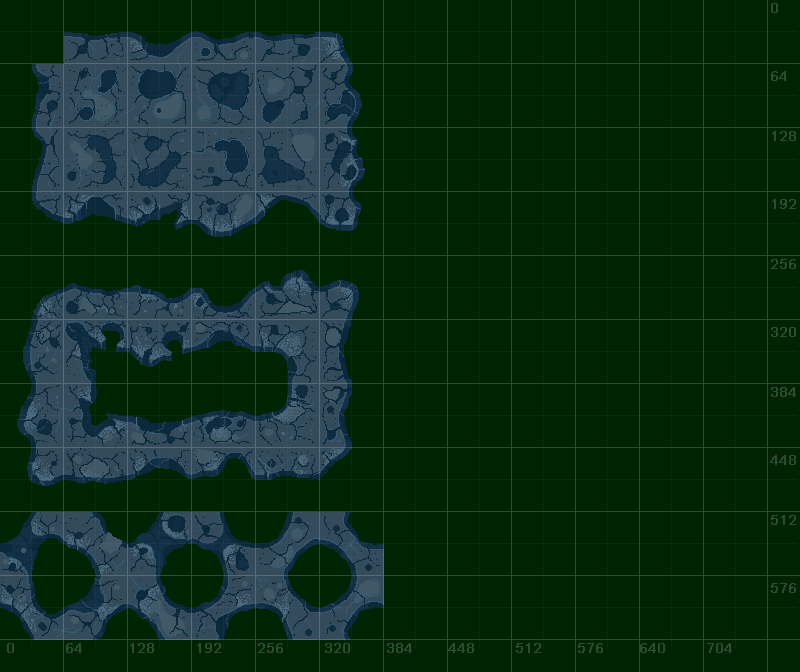
<style>
.page{position:relative;width:800px;height:672px;background:#002402}
.page>*{position:absolute;margin:0}
.t1{font:14px/7.5px "ArialMT";color:#2e4c30;font-weight:bold}
.t2{font:14px "ArialMT";color:#2e4c30;font-weight:bold}
</style>
<div class="page">
<p class="t1" style="left:770px;top:3px;width:26px;height:590px">0<br><br><br><br><br><br><br><br><br>64<br><br><br><br><br><br><br><br>128<br><br><br><br><br><br><br><br><br>192<br><br><br><br><br><br><br><br>256<br><br><br><br><br><br><br><br><br>320<br><br><br><br><br><br><br><br>384<br><br><br><br><br><br><br><br><br>448<br><br><br><br><br><br><br><br>512<br><br><br><br><br><br><br><br><br>576</p>
<p class="t2" style="left:7px;top:643px;width:725px;height:10px">0          64         128        192       256        320       384       448        512       576       640        704</p>
</div>
